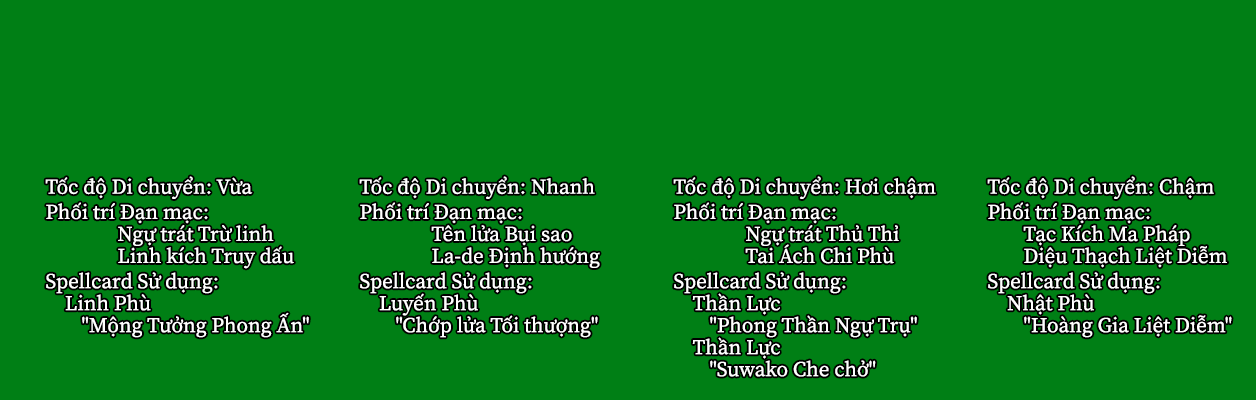
<style>
.page{position:relative;width:1256px;height:400px;background:#007f15}
.page>*{position:absolute;margin:0}
.t1{font:21px "SourceSerifRoman-Regular";color:#ffffff}
.t2{font:21px/22px "SourceSerifRoman-Regular";color:#ffffff}
</style>
<div class="page">
<p class="t1" style="left:45px;top:176px;width:264px;height:162px">Tốc độ Di chuyển: Vừa<br>Phối trí Đạn mạc:<br><span class="t2">  Ngự trát Trừ linh<br>  Linh kích Truy dấu<br></span>Spellcard Sử dụng:<br><span class="t2">    Linh Phù <br> "Mộng Tưởng Phong Ấn"</span></p>
<p class="t1" style="left:359px;top:176px;width:241px;height:162px">Tốc độ Di chuyển: Nhanh<br>Phối trí Đạn mạc:<br><span class="t2">  Tên lửa Bụi sao<br>  La-de Định hướng<br></span>Spellcard Sử dụng:<br><span class="t2">    Luyến Phù<br> "Chớp lửa Tối thượng"</span></p>
<p class="t2" style="left:673px;top:176px;width:263px;height:201px"><span class="t1">Tốc độ Di chuyển: Hơi chậm<br>Phối trí Đạn mạc:<br></span>  Ngự trát Thủ Thỉ<br>  Tai Ách Chi Phù<br><span class="t1">Spellcard Sử dụng:<br></span>    Thần Lực<br> "Phong Thần Ngự Trụ"<br>    Thần Lực<br> "Suwako Che chở"</p>
<p class="t1" style="left:987px;top:176px;width:245px;height:162px">Tốc độ Di chuyển: Chậm<br>Phối trí Đạn mạc:<br><span class="t2"> Tạc Kích Ma Pháp<br> Diệu Thạch Liệt Diễm<br></span>Spellcard Sử dụng:<br><span class="t2">    Nhật Phù<br> "Hoàng Gia Liệt Diễm"</span></p>
</div>
